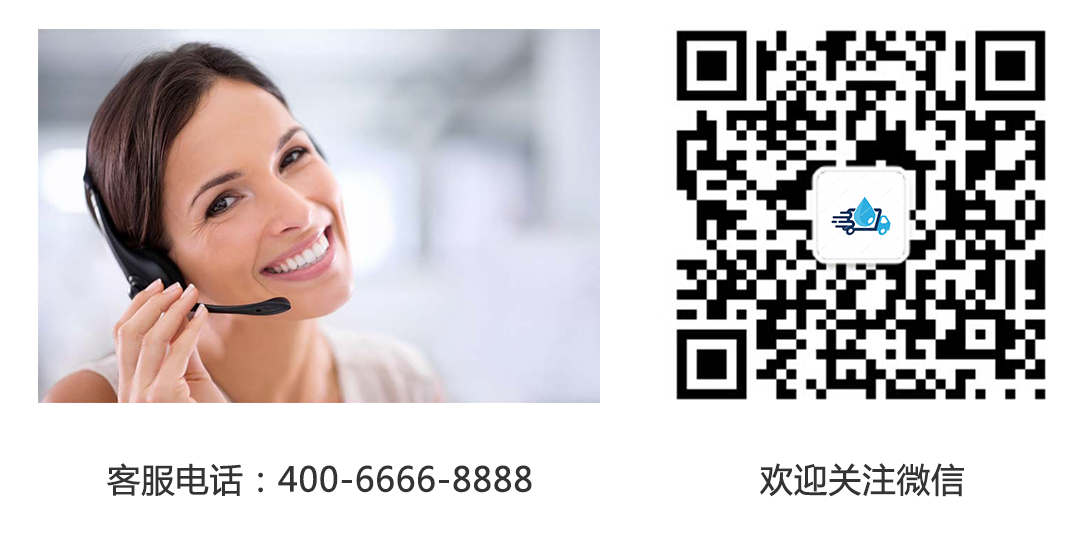
<style>
.page{position:relative;width:1089px;height:549px;background:#ffffff}
.page>*{position:absolute;margin:0}
.t1{font:33.3px "MicrosoftYaHei";color:#333333;font-weight:bold}
</style>
<div class="page">
<p class="t1" style="left:107px;top:463px;width:857px;height:34px">客服电话：400-6666-8888                     欢迎关注微信</p>
</div>
